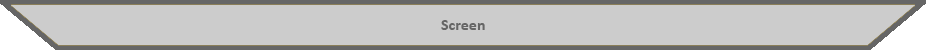
<style>
.page{position:relative;width:926px;height:50px;background:#cccccc}
.page>*{position:absolute;margin:0}
.t1{font:16px "Calibri-Bold";color:#666666}
</style>
<div class="page">
<p class="t1" style="left:441px;top:20px;width:44px;height:10px">Screen</p>
</div>
